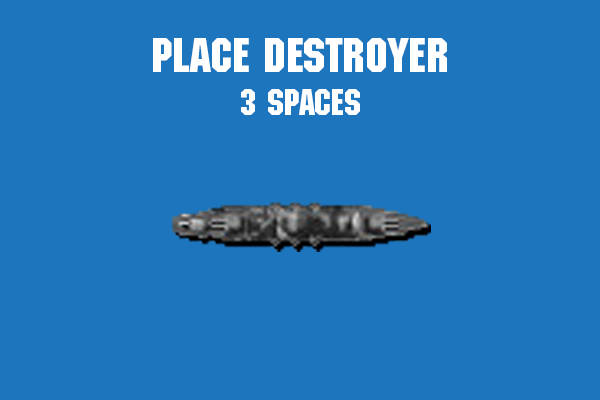
<style>
.page{position:relative;width:600px;height:400px;background:#1d75bd}
.page>*{position:absolute;margin:0}
.t1{font:48px "MachineStd";color:#ffffff}
.t2{font:36px "MachineStd";color:#ffffff}
</style>
<div class="page">
<p class="t1" style="left:153px;top:38px;width:294px;height:77px;text-align:center">Place DESTROYER<br><span class="t2">3 spaces</span></p>
</div>
